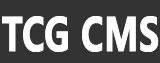
<style>
.page{position:relative;width:160px;height:63px;background:#333333}
.page>*{position:absolute;margin:0}
.t1{font:45px "MicrosoftYaHei";color:#ffffff;font-weight:bold;scale:0.73 1}
</style>
<div class="page">
<p class="t1" style="left:2px;top:16px;width:157px;height:36px">TCG CMS</p>
</div>
